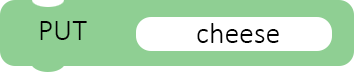
<style>
.page{position:relative;width:354px;height:72px;background:#8fcf93}
.page>*{position:absolute;margin:0}
.t1{font:30px "Calibri-Light";color:#000000}
</style>
<div class="page">
<p class="t1" style="left:40px;top:21px;width:47px;height:19px">PUT</p>
<p class="t1" style="left:197px;top:23px;width:82px;height:20px">cheese</p>
</div>
